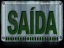
<style>
.page{position:relative;width:64px;height:48px}
.page>*{position:absolute;margin:0}
.t1{font:32.2px "Arial-Black";letter-spacing:-0.05em;color:#183918;text-transform:uppercase;scale:0.49 1}
.t2{font:18.9px "Arial-Black";letter-spacing:-0.05em;color:#183918;text-transform:uppercase;font-weight:bold;scale:0.88 1}
</style>
<div class="page">
<p class="t1" style="left:7px;top:10px;width:51px;height:25px">SAIDA</p>
<p class="t2" style="left:30px;top:7px;width:6px;height:4px">´</p>
</div>
